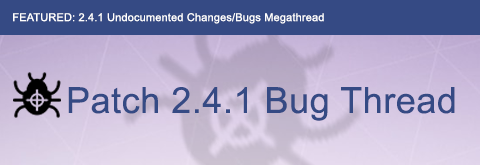
<style>
.page{position:relative;width:480px;height:165px;background:#354a84}
.page>*{position:absolute;margin:0}
.t1{font:11px "ArialMT";letter-spacing:0.015em;color:#ffffff}
.t2{font:36px "ArialMT";letter-spacing:0.015em;color:#354a84}
</style>
<div class="page">
<p class="t1" style="left:13px;top:13px;width:311px;height:11px">FEATURED: 2.4.1 Undocumented Changes/Bugs Megathread</p>
<p class="t2" style="left:68px;top:87px;width:387px;height:34px">Patch 2.4.1 Bug Thread</p>
</div>
